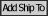
<style>
.page{position:relative;width:48px;height:16px;background:#cdcdcd}
.page>*{position:absolute;margin:0}
.t1{font:10px "Tahoma";letter-spacing:-0.1em;color:#000000}
</style>
<div class="page">
<p class="t1" style="left:2px;top:3px;width:43px;height:11px">Add Ship To</p>
</div>
